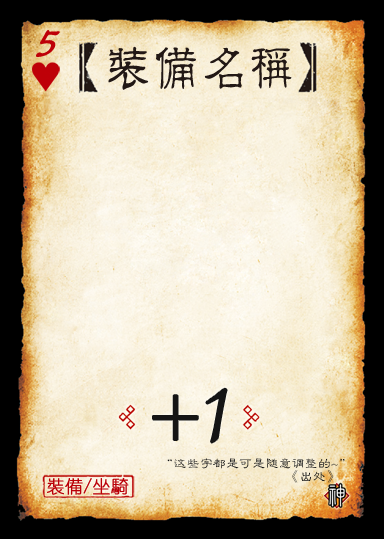
<style>
.page{position:relative;width:384px;height:539px}
.page>*{position:absolute;margin:0}
.t1{font:48.1px "Jxixinkai";color:#be0008;font-weight:bold;font-style:italic}
.t2{font:50.2px "¾­µä·±½ÇÁ¥ Regular";color:#221815;scale:0.95 1}
.t3{font:100.5px "Jxixinkai";color:#151515}
.t4{font:74.3px "Jxixinkai";color:#151515}
.t5{font:13.1px/13.1px "FZLBJW--GB1-0";color:#151515}
.t6{font:17.5px "YouYuan";color:#ba0007;font-weight:bold}
</style>
<div class="page">
<p class="t1" style="left:36px;top:30px;width:24px;height:27px">5</p>
<p class="t2" style="left:108px;top:46px;width:184px;height:44px">装备名称</p>
<p class="t3" style="left:206px;top:388px;width:21px;height:55px">1</p>
<p class="t4" style="left:153px;top:395px;width:45px;height:45px">+</p>
<p class="t5" style="left:167px;top:458px;width:178px;height:25px;text-align:right">“这些字都是可是随意调整的~”<br>                                      《出处》</p>
<p class="t6" style="left:47px;top:477px;width:82px;height:18px">裝備/坐騎</p>
</div>
